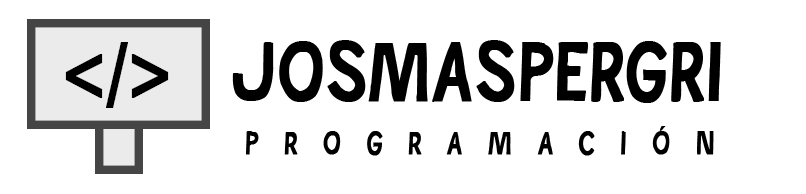
<style>
.page{position:relative;width:806px;height:194px;background:#ffffff}
.page>*{position:absolute;margin:0}
.t1{font:72px "RayJohnson";color:#000000;font-variant:small-caps;font-weight:bold;scale:0.8 1}
.t2{font:90px "ArialMT";color:#000000;font-variant:small-caps;font-weight:bold;scale:0.8 1}
.t3{font:28px "RayJohnson";letter-spacing:1.1em;color:#000000;font-variant:small-caps;font-weight:bold;scale:0.8 1}
</style>
<div class="page">
<p class="t1" style="left:232px;top:40px;width:489px;height:63px">JOSMASPERGRI</p>
<p class="t2" style="left:65px;top:42px;width:104px;height:66px">&lt;/&gt;</p>
<p class="t3" style="left:246px;top:126px;width:468px;height:30px">PROGRAMACIÓN</p>
</div>
